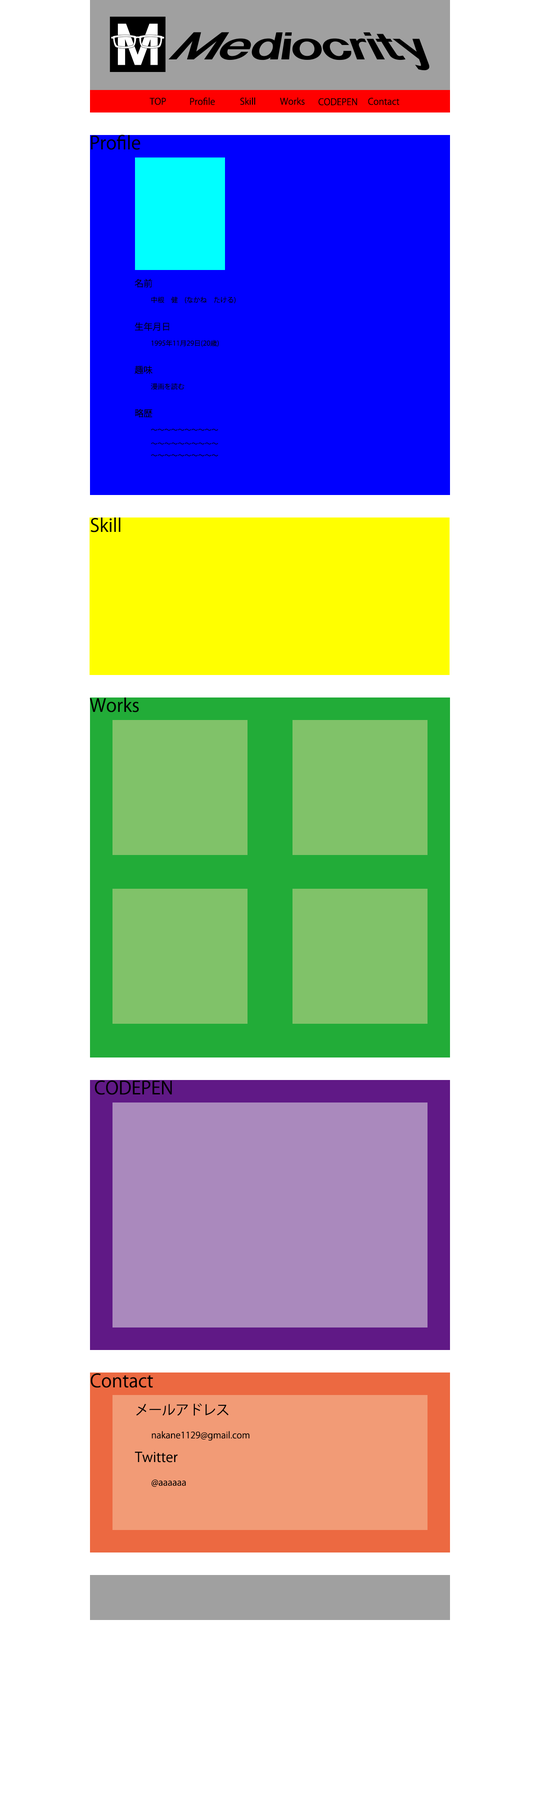
<style>
.page{position:relative;width:540px;height:1800px;background:#ffffff}
.page>*{position:absolute;margin:0}
.t1{font:9px "KozGoPro-Regular";color:#000000}
.t2{font:18px "KozGoPro-Regular";color:#000000}
.t3{font:6.8px "KozGoPro-Regular";color:#000000}
.t4{font:13.5px "KozGoPro-Regular";color:#000000}
</style>
<div class="page">
<p class="t1" style="left:149px;top:98px;width:17px;height:7px">TOP</p>
<p class="t1" style="left:190px;top:97px;width:25px;height:8px">Profile</p>
<p class="t1" style="left:240px;top:97px;width:15px;height:8px">Skill</p>
<p class="t1" style="left:280px;top:97px;width:25px;height:8px">Works</p>
<p class="t1" style="left:318px;top:98px;width:39px;height:7px">CODEPEN</p>
<p class="t1" style="left:368px;top:98px;width:32px;height:7px">Contact</p>
<p class="t2" style="left:91px;top:135px;width:49px;height:15px">Profile</p>
<p class="t3" style="left:135px;top:279px;width:101px;height:177px"><span class="t1">名前<br> </span>中根　健　(なかね　たける)<br><br><span class="t1">生年月日<br> </span>1995年11月29日(20歳)<br><br><span class="t1">趣味<br> </span>漫画を読む<br><br><span class="t1">略歴<br> </span>〜〜〜〜〜〜〜〜〜〜<br> 〜〜〜〜〜〜〜〜〜〜<br> 〜〜〜〜〜〜〜〜〜〜</p>
<p class="t2" style="left:90px;top:518px;width:31px;height:14px">Skill</p>
<p class="t2" style="left:90px;top:698px;width:49px;height:14px">Works</p>
<p class="t2" style="left:94px;top:1080px;width:78px;height:15px">CODEPEN</p>
<p class="t2" style="left:90px;top:1373px;width:63px;height:15px">Contact</p>
<p class="t1" style="left:135px;top:1403px;width:115px;height:84px"><span class="t4">メールアドレス<br> </span>nakane1129@gmail.com<br><span class="t4">Twitter<br> </span>@aaaaaa</p>
</div>
